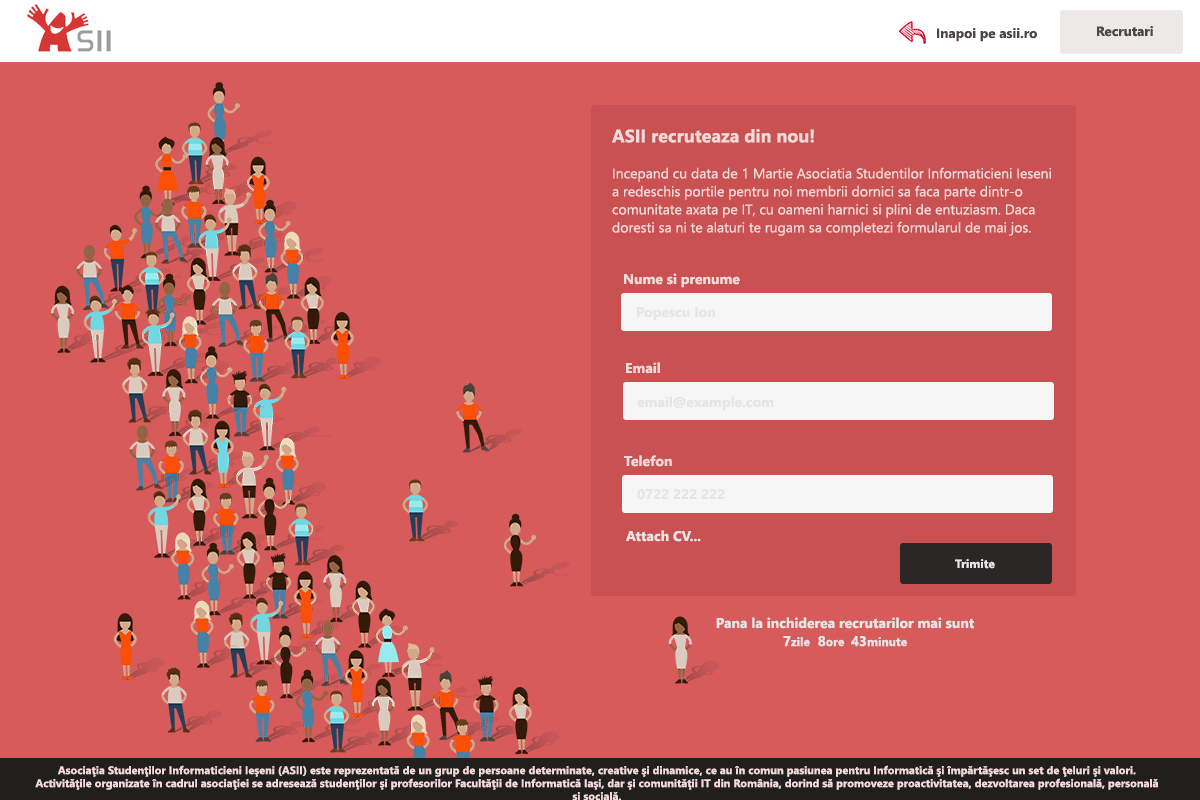
<style>
.page{position:relative;width:1200px;height:800px;background:#d75b5b}
.page>*{position:absolute;margin:0}
.t1{font:13.5px "SegoeUI-Bold";color:#4b4545}
.t2{font:14px/18px "SegoeUI";color:#f3d9d9}
.t3{font:18px/18px "SegoeUI-Bold";color:#f3d9d9}
.t4{font:14px "SegoeUI-Bold";color:#f3d9d9}
.t5{font:14px "SegoeUI-Bold";color:#e6e6e6}
.t6{font:12px "SegoeUI-Bold";color:#e6e6e6}
.t7{font:14px/18px "SegoeUI-Bold";color:#e6e6e6}
.t8{font:12px/18px "SegoeUI-Bold";color:#e6e6e6}
</style>
<div class="page">
<p class="t1" style="left:937px;top:28px;width:100px;height:14px">Inapoi pe asii.ro</p>
<p class="t1" style="left:1097px;top:26px;width:56px;height:11px">Recrutari</p>
<p class="t2" style="left:612px;top:129px;width:439px;height:107px"><span class="t3">ASII recruteaza din nou!<br><br></span>Incepand cu data de 1 Martie Asociatia Studentilor Informaticieni Ieseni a redeschis portile pentru noi membrii dornici sa faca parte dintr-o comunitate axata pe IT, cu oameni harnici si plini de entuziasm. Daca doresti sa ni te alaturi te rugam sa completezi formularul de mai jos.</p>
<p class="t4" style="left:624px;top:273px;width:116px;height:15px">Nume si prenume</p>
<p class="t5" style="left:637px;top:307px;width:78px;height:14px">Popescu Ion</p>
<p class="t4" style="left:626px;top:362px;width:34px;height:12px">Email</p>
<p class="t5" style="left:637px;top:396px;width:137px;height:15px">email@example.com</p>
<p class="t4" style="left:624px;top:455px;width:48px;height:12px">Telefon</p>
<p class="t5" style="left:637px;top:489px;width:88px;height:11px">0722 222 222</p>
<p class="t5" style="left:626px;top:530px;width:75px;height:12px">Attach CV...</p>
<p class="t6" style="left:955px;top:559px;width:40px;height:10px">Trimite</p>
<p class="t7" style="left:716px;top:617px;width:258px;height:30px;text-align:center">Pana la inchiderea recrutarilor mai sunt<br>7<span class="t8">zile</span>  8<span class="t8">ore  </span>43<span class="t8">minute</span></p>
</div>
